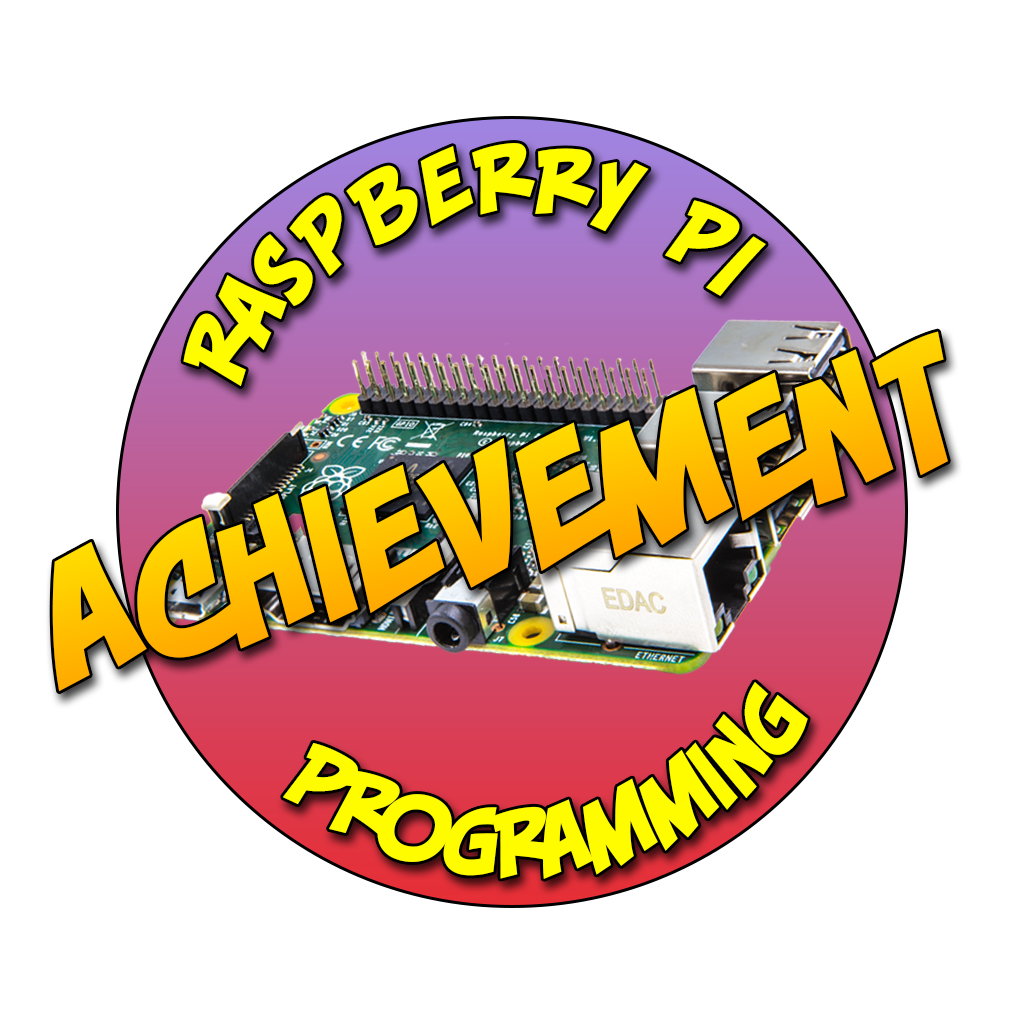
<style>
.page{position:relative;width:1024px;height:1024px;background:#ffffff}
.page>*{position:absolute;margin:0}
.t1{font:120px "PiekosFXBasicBB";color:#fffc00}
.t2{font:220.5px "PiekosFXBasicBB";color:#ffc000}
</style>
<div class="page">
<p class="t1" style="left:183px;top:143px;width:583px;height:243px;text-align:right">Raspberry PI</p>
<p class="t2" style="left:52px;top:331px;width:896px;height:361px;rotate:-14deg">Achievement</p>
<p class="t1" style="left:283px;top:682px;width:525px;height:197px">Programming</p>
</div>
